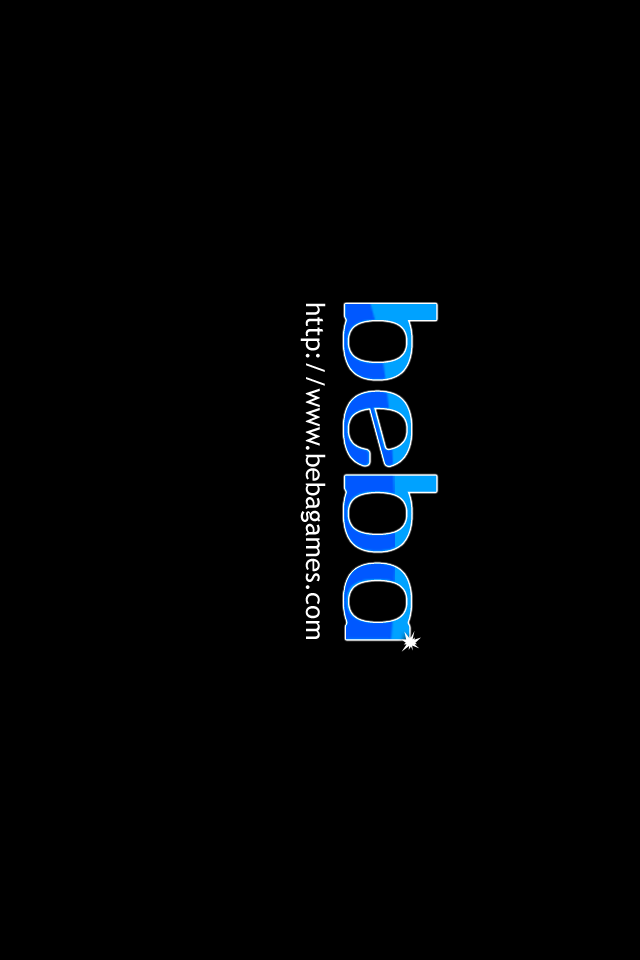
<style>
.page{position:relative;width:640px;height:960px;background:#000000}
.page>*{position:absolute;margin:0}
.t1{font:26px "TrebuchetMS";color:#ffffff}
.t2{font:120px "YiggivooUnicode"}
</style>
<div class="page">
<p class="t1" style="left:300px;top:303px;width:26px;height:336px;rotate:90deg">http://www.bebagames.com</p>
<p class="t2" style="left:344px;top:304px;width:93px;height:336px;rotate:90deg">beba</p>
</div>
